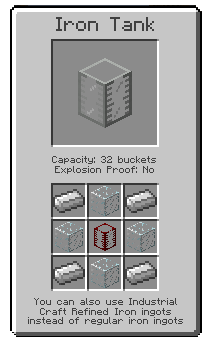
<style>
.page{position:relative;width:212px;height:342px;background:#c6c6c6}
.page>*{position:absolute;margin:0}
.t1{font:16px "Minecraftia";color:#404040}
.t2{font:8px "Minecraftia";color:#404040}
</style>
<div class="page">
<p class="t1" style="left:56px;top:17px;width:98px;height:14px">Iron Tank</p>
<p class="t2" style="left:52px;top:156px;width:104px;height:18px;text-align:center">Capacity: 32 buckets<br>Explosion Proof: No</p>
<p class="t2" style="left:28px;top:298px;width:155px;height:27px;text-align:center">You can also use Industrial Craft Refined Iron ingots instead of regular iron ingots</p>
</div>
